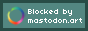
<style>
.page{position:relative;width:88px;height:31px;background:#538781}
.page>*{position:absolute;margin:0}
.t1{font:7.5px "04b03";color:#ffffff}
</style>
<div class="page">
<p class="t1" style="left:28px;top:9px;width:54px;height:14px">Blocked by<br>mastodon.art</p>
</div>
